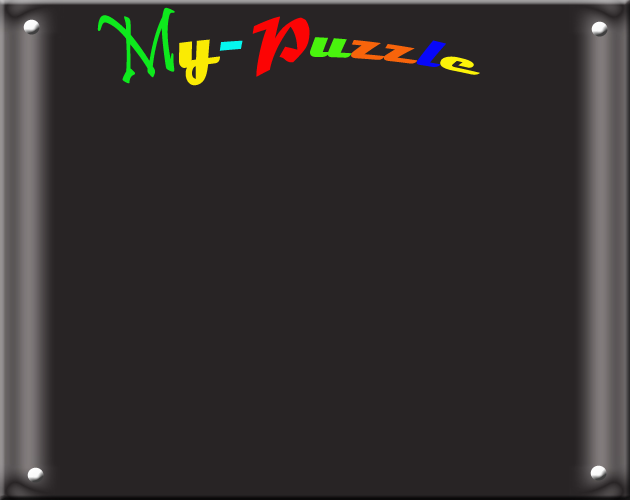
<style>
.page{position:relative;width:630px;height:500px;background:#282425}
.page>*{position:absolute;margin:0}
.t1{font:60px "Magneto-Bold";color:#f7640b}
.t2{font:72px "Pristina-Regular";color:#0ee91d}
.t3{font:60px "Magneto-Bold";color:#faeb03}
.t4{font:60px "Magneto-Bold";color:#05f7ee}
.t5{font:60px "MaturaMTScriptCapitals";color:#fc0404}
.t6{font:60px "Magneto-Bold";color:#49f40d}
.t7{font:60px "Magneto-Bold";color:#0707fa}
.t8{font:60px "Magneto-Bold";color:#fcf309}
.t9{font:93px "Magneto-Bold"}
</style>
<div class="page">
<p class="t1" style="left:97px;top:7px;width:383px;height:79px"><span class="t2">M</span><span class="t3">y</span><span class="t4">-</span><span class="t5">P</span><span class="t6">u</span>zz<span class="t7">l</span><span class="t8">e</span></p>
<p class="t9" style="left:23px;top:19px;width:17px;height:16px">.</p>
<p class="t9" style="left:591px;top:21px;width:17px;height:16px">.</p>
<p class="t9" style="left:27px;top:467px;width:17px;height:16px">.</p>
<p class="t9" style="left:590px;top:465px;width:17px;height:16px">.</p>
</div>
